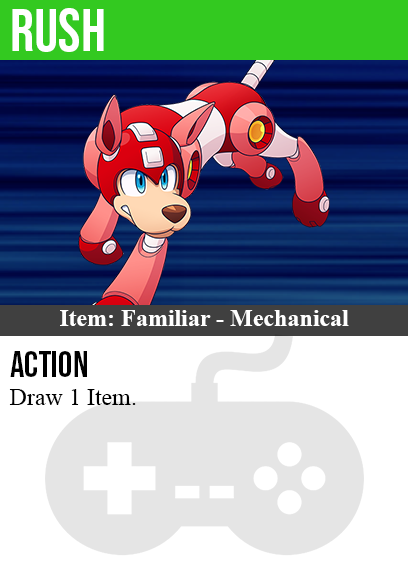
<style>
.page{position:relative;width:408px;height:585px;background:#ffffff}
.page>*{position:absolute;margin:0}
.t1{font:60px "BebasNeue-Regular";color:#ffffff}
.t2{font:24px "TimesNewRomanPS-BoldMT";color:#ffffff}
.t3{font:36px "BebasNeue-Regular";color:#000000}
.t4{font:24px "TimesNewRomanPSMT";color:#000000}
</style>
<div class="page">
<p class="t1" style="left:12px;top:8px;width:92px;height:44px">rush</p>
<p class="t2" style="left:60px;top:310px;width:289px;height:16px">Item: Familiar - Mechanical</p>
<p class="t3" style="left:10px;top:351px;width:77px;height:26px">action</p>
<p class="t4" style="left:9px;top:389px;width:127px;height:16px">Draw 1 Item.</p>
</div>
